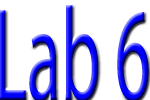
<style>
.page{position:relative;width:150px;height:100px;background:#ffffff}
.page>*{position:absolute;margin:0}
.t1{font:133.1px "MyriadPro-Regular";scale:0.53 1}
</style>
<div class="page">
<p class="t1" style="left:0px;top:5px;width:149px;height:97px">Lab 6</p>
</div>
